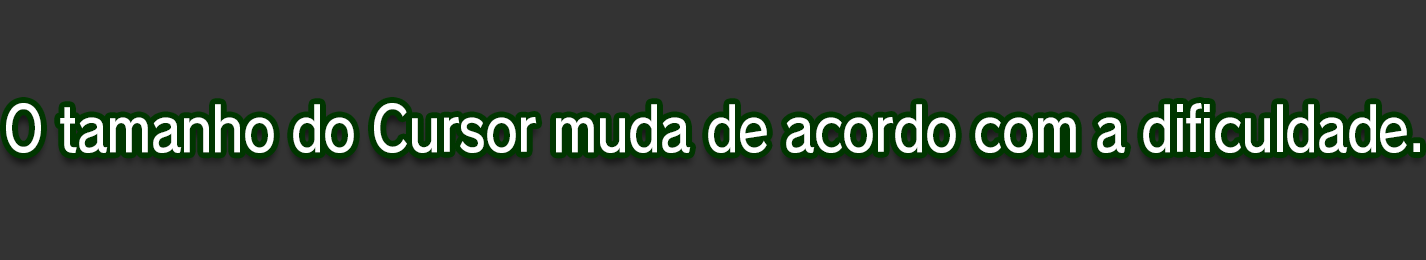
<style>
.page{position:relative;width:1426px;height:260px;background:#333333}
.page>*{position:absolute;margin:0}
.t1{font:61.3px "RodinPro-DB";letter-spacing:-0.022em;color:#ffffff;scale:0.84 1}
</style>
<div class="page">
<p class="t1" style="left:6px;top:103px;width:1414px;height:50px">O tamanho do Cursor muda de acordo com a dificuldade.</p>
</div>
